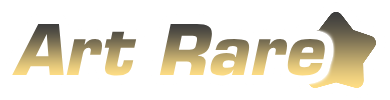
<style>
.page{position:relative;width:390px;height:100px;background:#ffffff}
.page>*{position:absolute;margin:0}
.t1{font:68px "Eurostile-BoldOblique"}
</style>
<div class="page">
<p class="t1" style="left:12px;top:23px;width:313px;height:53px">Art Rare</p>
</div>
